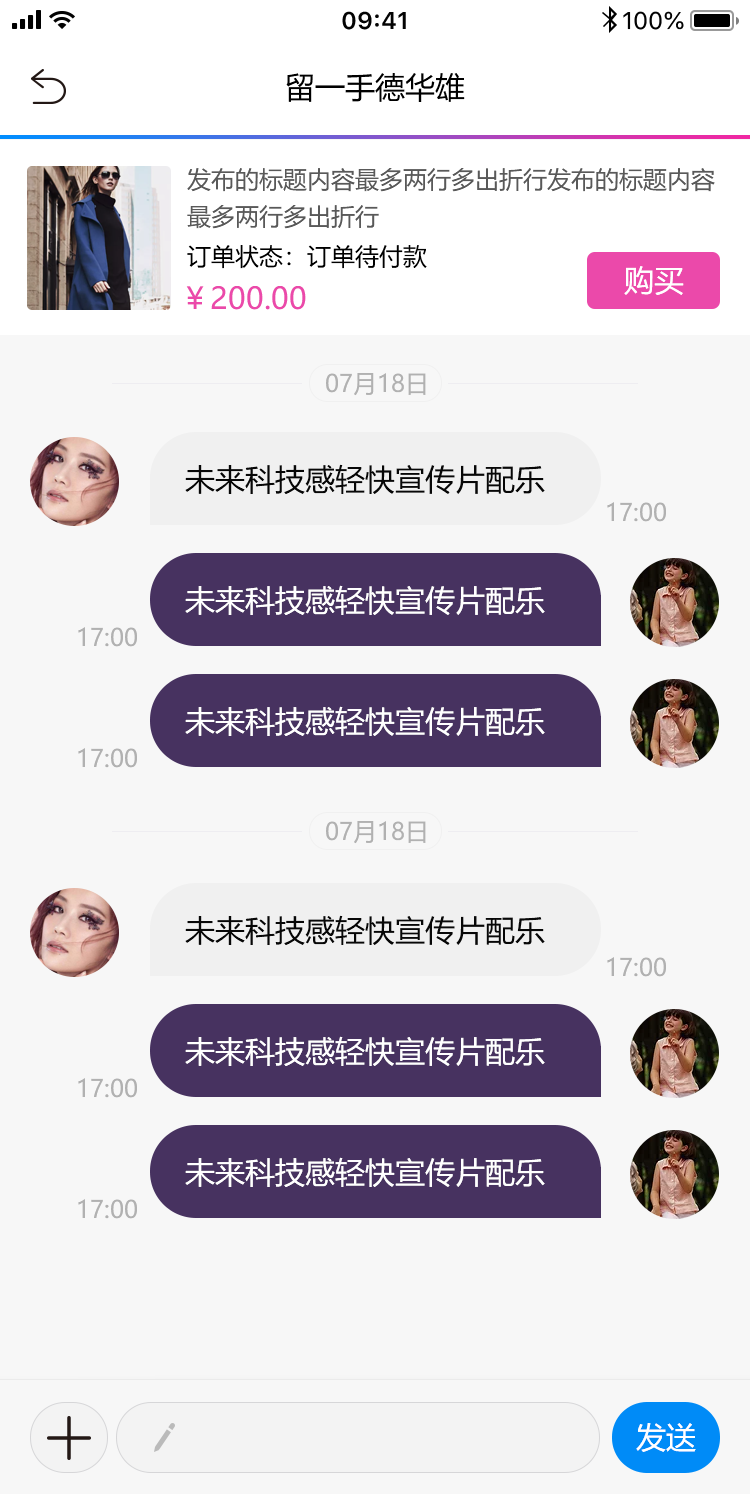
<style>
.page{position:relative;width:750px;height:1494px;background:#f7f7f7}
.page>*{position:absolute;margin:0}
.t1{font:30px "MicrosoftYaHei";color:#000000}
.t2{font:24px/37px "MicrosoftYaHei";color:#595959}
.t3{font:24px "MicrosoftYaHei";color:#000000}
.t4{font:30px "MicrosoftYaHei";color:#ffffff}
.t5{font:30px "MicrosoftYaHei";color:#eb49aa}
.t6{font:24px "MicrosoftYaHei";color:#b1b1b1}
.t7{font:30px "MicrosoftYaHei";color:#070707}
</style>
<div class="page">
<p class="t1" style="left:286px;top:73px;width:179px;height:29px">留一手德华雄</p>
<p class="t2" style="left:187px;top:168px;width:528px;height:61px">发布的标题内容最多两行多出折行发布的标题内容<br>最多两行多出折行</p>
<p class="t3" style="left:187px;top:245px;width:240px;height:24px">订单状态：订单待付款</p>
<p class="t4" style="left:624px;top:266px;width:60px;height:29px">购买</p>
<p class="t5" style="left:186px;top:286px;width:120px;height:24px">￥200.00</p>
<p class="t6" style="left:326px;top:373px;width:100px;height:23px">07月18日</p>
<p class="t7" style="left:185px;top:464px;width:360px;height:30px">未来科技感轻快宣传片配乐</p>
<p class="t6" style="left:607px;top:502px;width:59px;height:20px">17:00</p>
<p class="t4" style="left:185px;top:585px;width:360px;height:30px">未来科技感轻快宣传片配乐</p>
<p class="t6" style="left:78px;top:627px;width:59px;height:20px">17:00</p>
<p class="t4" style="left:185px;top:706px;width:360px;height:30px">未来科技感轻快宣传片配乐</p>
<p class="t6" style="left:78px;top:748px;width:59px;height:20px">17:00</p>
<p class="t6" style="left:326px;top:821px;width:100px;height:23px">07月18日</p>
<p class="t7" style="left:185px;top:915px;width:360px;height:30px">未来科技感轻快宣传片配乐</p>
<p class="t6" style="left:607px;top:957px;width:59px;height:20px">17:00</p>
<p class="t4" style="left:185px;top:1036px;width:360px;height:30px">未来科技感轻快宣传片配乐</p>
<p class="t6" style="left:78px;top:1078px;width:59px;height:20px">17:00</p>
<p class="t4" style="left:185px;top:1157px;width:360px;height:30px">未来科技感轻快宣传片配乐</p>
<p class="t6" style="left:78px;top:1199px;width:59px;height:20px">17:00</p>
<p class="t4" style="left:636px;top:1423px;width:60px;height:29px">发送</p>
</div>
